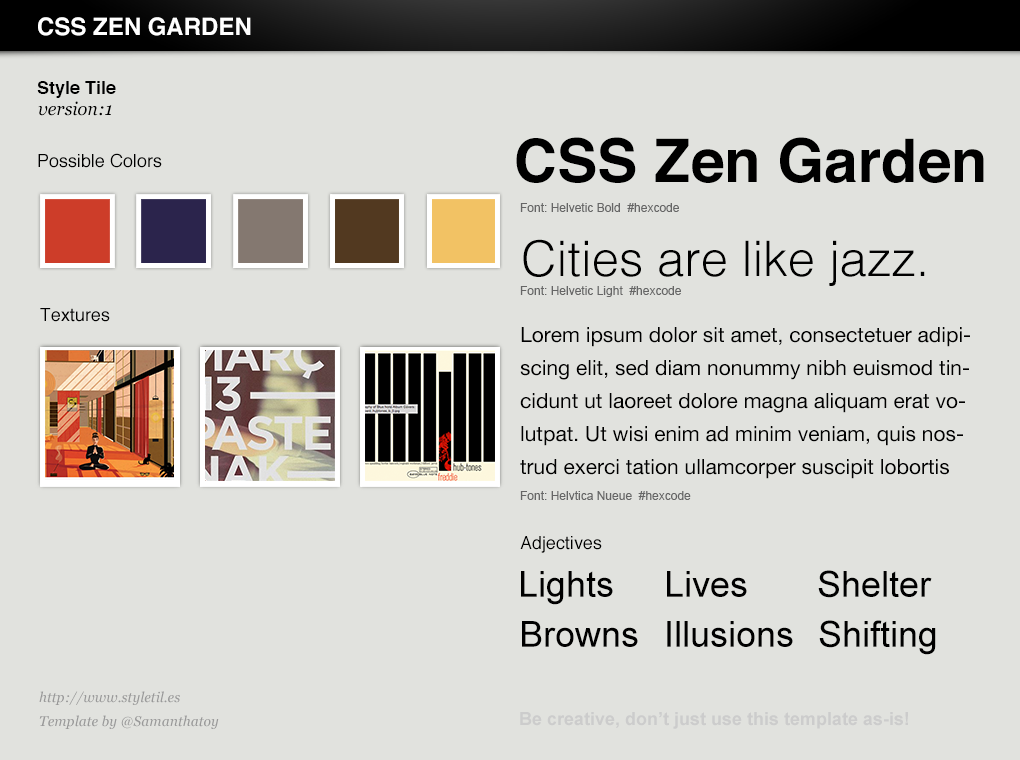
<style>
.page{position:relative;width:1020px;height:760px;background:#e1e2de}
.page>*{position:absolute;margin:0}
.t1{font:24px "Helvetica-Bold";color:#ffffff}
.t2{font:18px "Helvetica-Bold";color:#000000}
.t3{font:18px "Georgia-Italic";color:#000000}
.t4{font:60px "Helvetica-Bold";color:#000000}
.t5{font:18px "Helvetica";color:#000000}
.t6{font:12px "ArialMT";color:#666666}
.t7{font:49px "Helvetica-Light";color:#000000}
.t8{font:21px/33px "HelveticaNeue";color:#000000}
.t9{font:21px/24px "HelveticaNeue";color:#000000}
.t10{font:36px "ArialMT";color:#000000}
.t11{font:14px/24px "Georgia-Italic";color:#999999}
.t12{font:18px "Arial-BoldMT";color:#cccccc}
</style>
<div class="page">
<p class="t1" style="left:38px;top:17px;width:213px;height:19px">CSS ZEN GARDEN</p>
<p class="t2" style="left:37px;top:81px;width:79px;height:17px">Style Tile</p>
<p class="t3" style="left:38px;top:101px;width:74px;height:15px">version:1</p>
<p class="t4" style="left:516px;top:137px;width:468px;height:46px">CSS Zen Garden</p>
<p class="t5" style="left:38px;top:153px;width:124px;height:15px">Possible Colors</p>
<p class="t6" style="left:520px;top:203px;width:159px;height:9px">Font: Helvetic Bold  #hexcode</p>
<p class="t7" style="left:523px;top:239px;width:402px;height:47px">Cities are like jazz.</p>
<p class="t6" style="left:520px;top:286px;width:161px;height:11px">Font: Helvetic Light  #hexcode</p>
<p class="t5" style="left:40px;top:308px;width:70px;height:14px">Textures</p>
<p class="t8" style="left:520px;top:327px;width:450px;height:152px">Lorem ipsum dolor sit amet, consectetuer adipiscing elit, sed diam nonummy nibh euismod tincidunt ut laoreet dolore magna aliquam erat volutpat. Ut wisi enim ad minim veniam, quis nostrud exerci tation ullamcorper suscipit lobortis nisl ut aliquip ex ea commodo consequat. Duis autem vel feugait nulla facilisi<span class="t9">.</span></p>
<p class="t6" style="left:520px;top:491px;width:171px;height:9px">Font: Helvtica Nueue  #hexcode</p>
<p class="t5" style="left:520px;top:536px;width:82px;height:17px">Adjectives</p>
<p class="t10" style="left:521px;top:571px;width:92px;height:34px">Lights</p>
<p class="t10" style="left:667px;top:571px;width:80px;height:26px">Lives</p>
<p class="t10" style="left:818px;top:570px;width:114px;height:28px">Shelter</p>
<p class="t10" style="left:522px;top:621px;width:116px;height:26px">Browns</p>
<p class="t10" style="left:667px;top:621px;width:126px;height:26px">Illusions</p>
<p class="t10" style="left:819px;top:620px;width:117px;height:35px">Shifting</p>
<p class="t11" style="left:39px;top:691px;width:180px;height:38px">http://www.styletil.es<br>Template by @Samanthatoy</p>
<p class="t12" style="left:520px;top:712px;width:388px;height:17px">Be creative, don’t just use this template as-is!</p>
</div>
